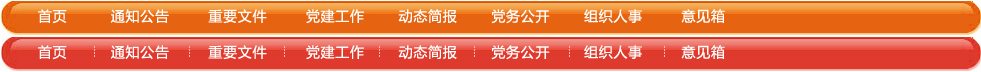
<style>
.page{position:relative;width:981px;height:72px}
.page>*{position:absolute;margin:0}
.t1{font:14px "MicrosoftYaHei";letter-spacing:0.05em;color:#ffffff}
</style>
<div class="page">
<p class="t1" style="left:38px;top:9px;width:687px;height:15px">首页         通知公告        重要文件        党建工作       动态简报       党务公开       组织人事        意见箱</p>
<p class="t1" style="left:38px;top:45px;width:687px;height:15px">首页         通知公告        重要文件        党建工作       动态简报       党务公开       组织人事        意见箱</p>
</div>
